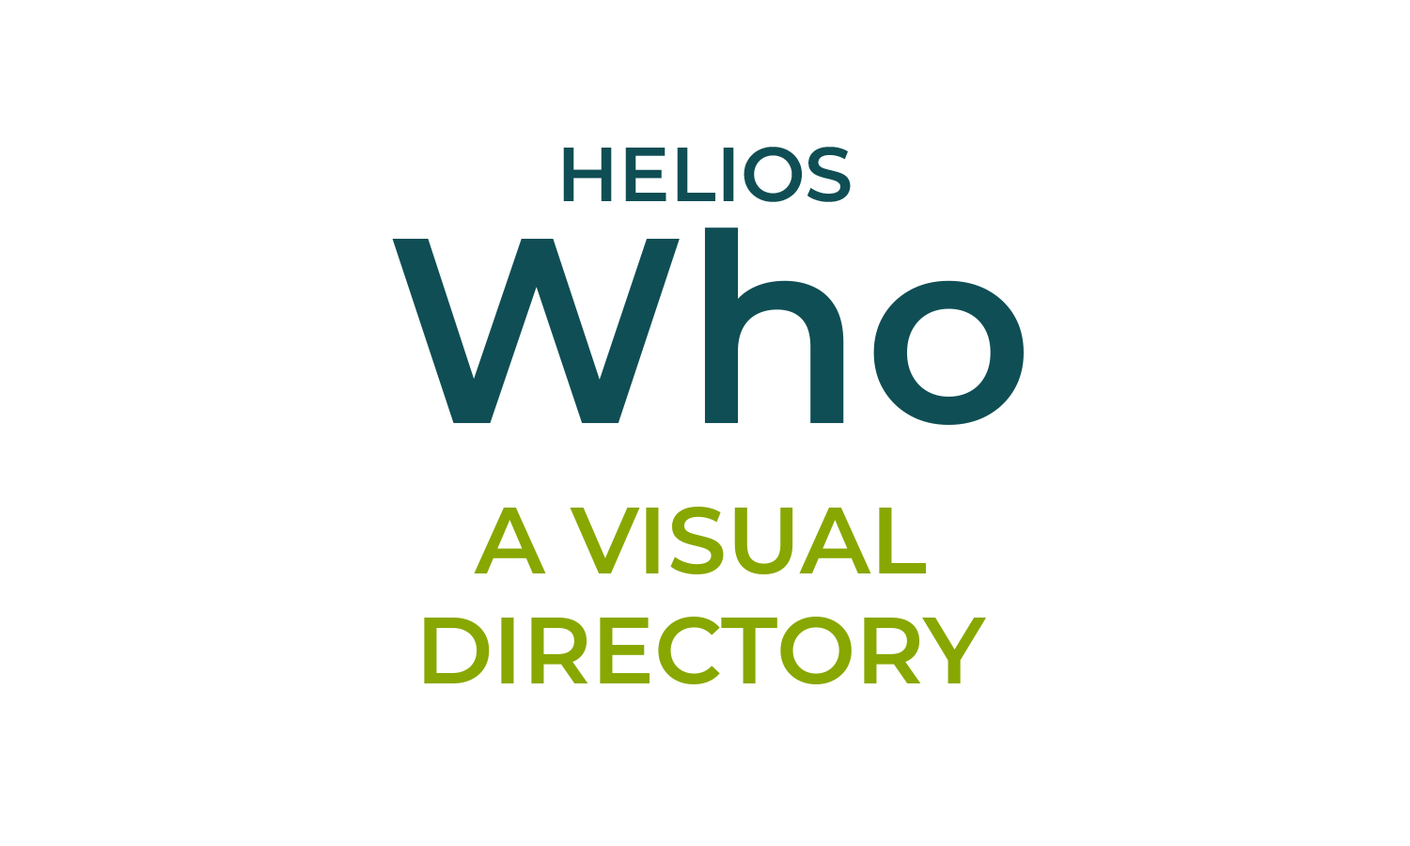
<style>
.page{position:relative;width:1410px;height:846px;background:#ffffff}
.page>*{position:absolute;margin:0}
.t1{font:76.6px "Montserrat-SemiBold";color:#0f4e54}
.t2{font:263.1px "Montserrat-SemiBold";color:#0f4e54}
.t3{font:94px/0.2px "Montserrat-SemiBold";color:#88a700;text-transform:uppercase}
</style>
<div class="page">
<p class="t1" style="left:563px;top:147px;width:288px;height:55px">HELIOS</p>
<p class="t2" style="left:392px;top:227px;width:631px;height:198px">Who</p>
<p class="t3" style="left:424px;top:507px;width:562px;height:177px;text-align:center">A Visual<br>directory</p>
</div>
